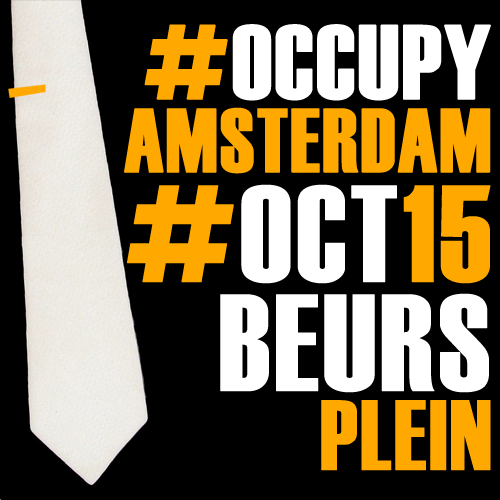
<style>
.page{position:relative;width:500px;height:500px;background:#000000}
.page>*{position:absolute;margin:0}
.t1{font:90px/73px "Haettenschweiler";color:#ffa800;font-weight:bold}
.t2{font:105px/86px "Haettenschweiler";color:#ffa800;font-weight:bold}
.t3{font:105px/86px "Haettenschweiler";color:#ffffff;font-weight:bold}
.t4{font:137px "Haettenschweiler";color:#ffffff;font-weight:bold}
.t5{font:137px "Haettenschweiler";color:#ffa800;font-weight:bold}
.t6{font:99px/79px "Haettenschweiler";color:#ffa800;font-weight:bold}
</style>
<div class="page">
<p class="t1" style="left:124px;top:24px;width:367px;height:150px;text-align:right"><span class="t2">#</span><span class="t3">OCCUPY<br></span>AMSTERDAM</p>
<p class="t4" style="left:127px;top:184px;width:364px;height:100px"><span class="t5">#</span>OCT<span class="t5">15</span></p>
<p class="t4" style="left:220px;top:293px;width:271px;height:178px;text-align:right">BEURS<br><span class="t6">PLEIN</span></p>
</div>
